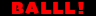
<style>
.page{position:relative;width:96px;height:16px;background:#000000}
.page>*{position:absolute;margin:0}
.t1{font:17.8px "Skia_2.919wght";letter-spacing:0.075em;color:#ff0000;scale:1.03 1}
</style>
<div class="page">
<p class="t1" style="left:12px;top:2px;width:72px;height:12px">BALLL!</p>
</div>
